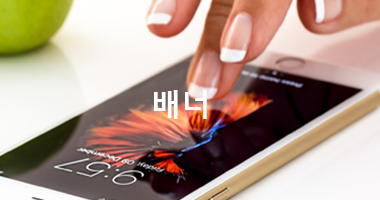
<style>
.page{position:relative;width:380px;height:200px}
.page>*{position:absolute;margin:0}
.t1{font:30px "MalgunGothicBold";color:#ffffff;text-transform:uppercase}
</style>
<div class="page">
<p class="t1" style="left:154px;top:90px;width:53px;height:29px">배너</p>
</div>
